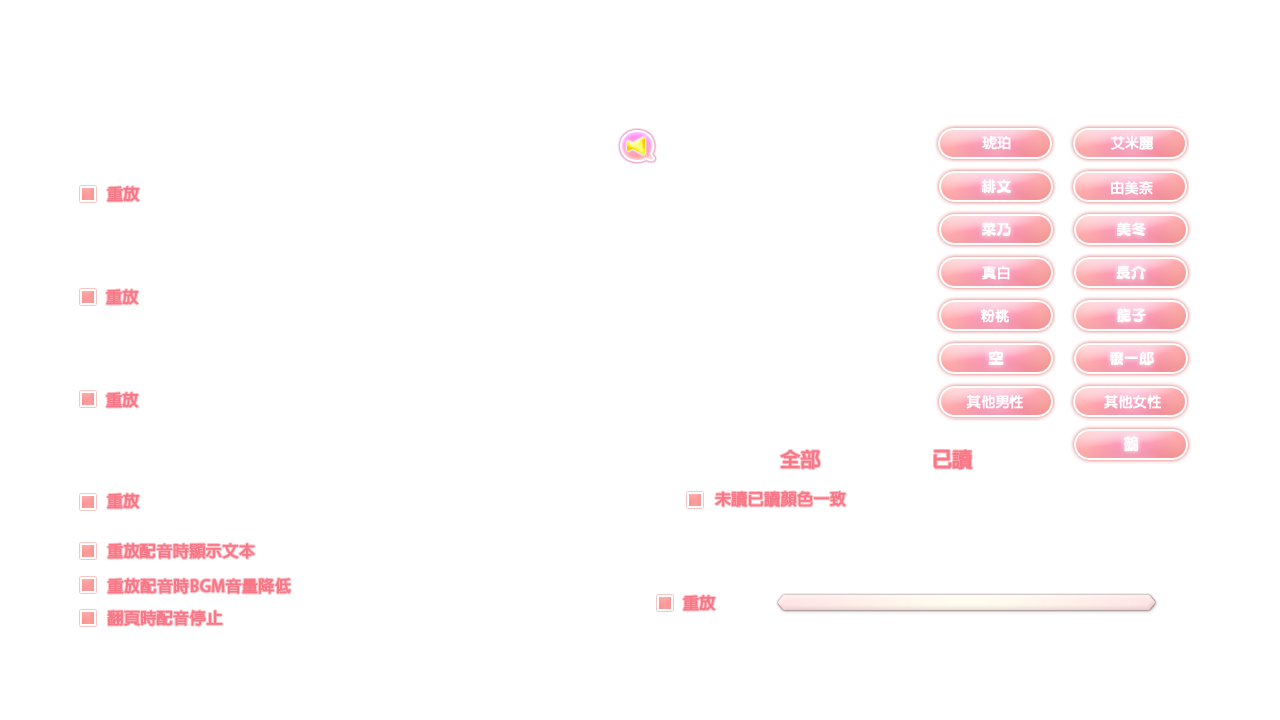
<style>
.page{position:relative;width:1280px;height:720px;background:#ffffff}
.page>*{position:absolute;margin:0}
.t1{font:14px "AdobeFanHeitiStd-Bold";color:#ffffff;font-weight:bold}
.t2{font:16px "AdobeFanHeitiStd-Bold";color:#f97887;font-weight:bold}
.t3{font:20px "AdobeFanHeitiStd-Bold";color:#f97887;font-weight:bold}
</style>
<div class="page">
<p class="t1" style="left:982px;top:135px;width:29px;height:15px">琥珀</p>
<p class="t1" style="left:1111px;top:135px;width:43px;height:15px">艾米麗</p>
<p class="t1" style="left:1111px;top:180px;width:42px;height:15px">由美奈</p>
<p class="t2" style="left:107px;top:186px;width:33px;height:16px">重放</p>
<p class="t1" style="left:982px;top:265px;width:28px;height:15px">真白</p>
<p class="t2" style="left:106px;top:289px;width:33px;height:16px">重放</p>
<p class="t1" style="left:980px;top:309px;width:29px;height:14px">粉桃</p>
<p class="t2" style="left:106px;top:392px;width:33px;height:16px">重放</p>
<p class="t1" style="left:966px;top:394px;width:57px;height:15px">其他男性</p>
<p class="t1" style="left:1104px;top:394px;width:57px;height:15px">其他女性</p>
<p class="t3" style="left:780px;top:449px;width:41px;height:20px">全部</p>
<p class="t3" style="left:934px;top:449px;width:38px;height:21px">已讀</p>
<p class="t2" style="left:107px;top:493px;width:33px;height:16px">重放</p>
<p class="t2" style="left:715px;top:491px;width:131px;height:16px">未讀已讀顏色一致</p>
<p class="t2" style="left:107px;top:543px;width:148px;height:16px">重放配音時顯示文本</p>
<p class="t2" style="left:107px;top:578px;width:184px;height:16px">重放配音時BGM音量降低</p>
<p class="t2" style="left:683px;top:595px;width:33px;height:16px">重放</p>
<p class="t2" style="left:107px;top:610px;width:116px;height:16px">翻頁時配音停止</p>
</div>
